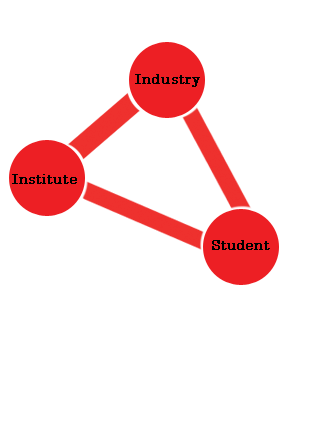
<style>
.page{position:relative;width:326px;height:434px;background:#ffffff}
.page>*{position:absolute;margin:0}
.t1{font:14px "Century";letter-spacing:0.01em;color:#000000;font-weight:bold}
</style>
<div class="page">
<p class="t1" style="left:135px;top:74px;width:65px;height:13px">Industry</p>
<p class="t1" style="left:12px;top:174px;width:65px;height:10px">Institute</p>
<p class="t1" style="left:212px;top:240px;width:58px;height:10px">Student</p>
</div>
